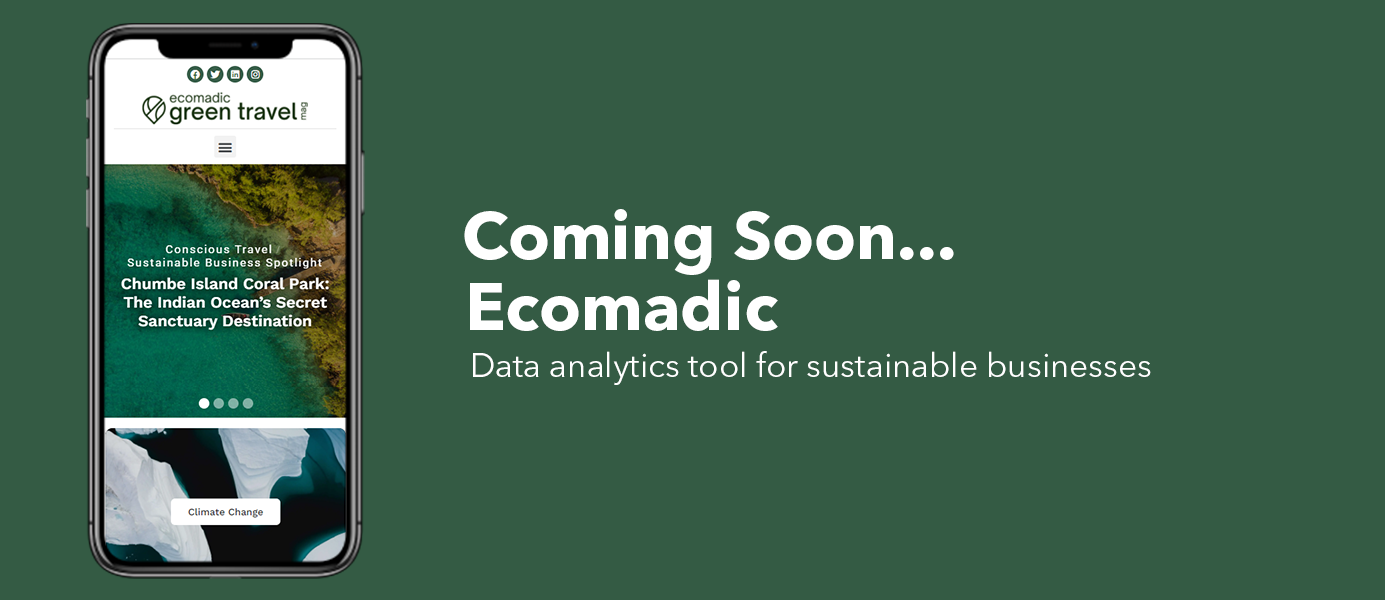
<style>
.page{position:relative;width:1385px;height:600px;background:#345b44}
.page>*{position:absolute;margin:0}
.t1{font:66.7px "AvenirNextLTPro-Bold";color:#ffffff}
.t2{font:33.3px "AvenirNextLTPro-Regular";color:#ffffff}
</style>
<div class="page">
<p class="t1" style="left:464px;top:209px;width:490px;height:66px">Coming Soon...</p>
<p class="t1" style="left:470px;top:279px;width:308px;height:52px">Ecomadic</p>
<p class="t2" style="left:473px;top:351px;width:678px;height:34px">Data analytics tool for sustainable businesses</p>
</div>
